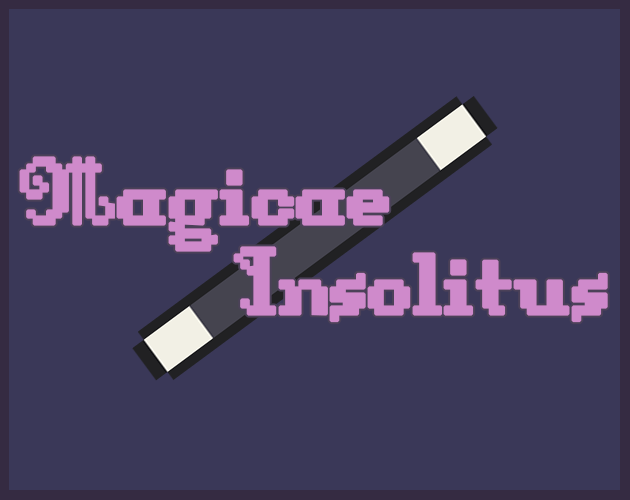
<style>
.page{position:relative;width:630px;height:500px;background:#3a3858}
.page>*{position:absolute;margin:0}
.t1{font:112px/90px "DungeonFont";letter-spacing:-0.02em;color:#cf8acb;font-weight:bold}
</style>
<div class="page">
<p class="t1" style="left:19px;top:156px;width:589px;height:167px">Magicae <br>Insolitus</p>
</div>
